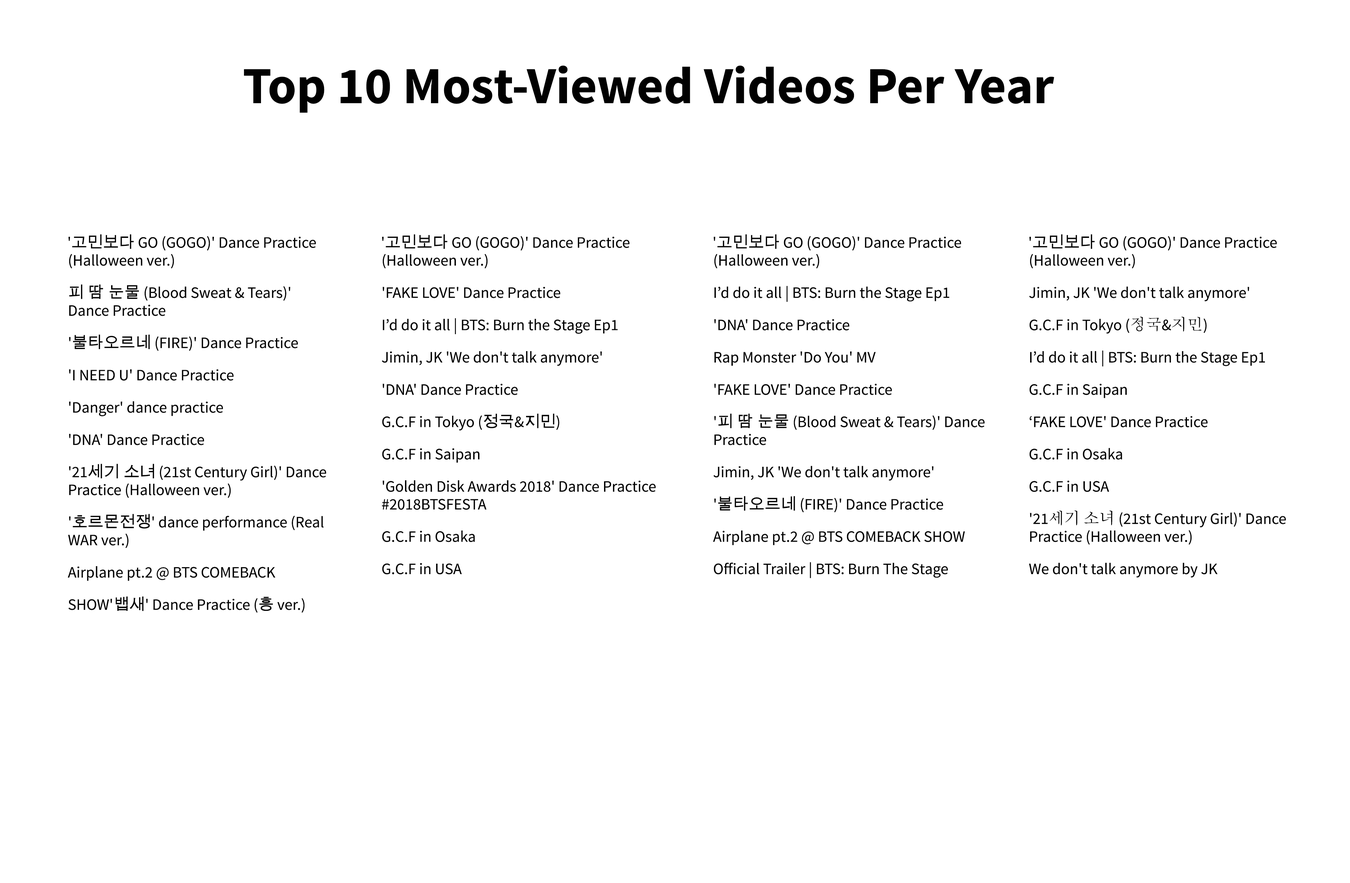
<style>
.page{position:relative;width:1350px;height:883px;background:#ffffff}
.page>*{position:absolute;margin:0}
.t1{font:51.9px "SourceSansPro-Bold";color:#010101}
.t2{font:15.9px/32.3px "SourceSansPro-Regular";color:#000000}
.t3{font:15.9px/32.3px "ArialUnicodeMS";color:#000000}
.t4{font:15.9px/17.9px "SourceSansPro-Regular";color:#000000}
.t5{font:15.9px/32.3px "AdobeMyungjoStd-Medium";color:#000000}
</style>
<div class="page">
<p class="t1" style="left:244px;top:65px;width:811px;height:48px">Top 10 Most-Viewed Videos Per Year</p>
<p class="t2" style="left:68px;top:234px;width:259px;height:379px">'<span class="t3">고민보다</span> GO (GOGO)' Dance Practice <span class="t4">(Halloween ver.)<br></span><span class="t3">피 땀 눈물</span> (Blood Sweat &amp; Tears)'  <span class="t4">Dance Practice<br></span>'<span class="t3">불타오르네</span> (FIRE)' Dance Practice<br>'I NEED U' Dance Practice<br>'Danger' dance practice <br>'DNA' Dance Practice<br>'21<span class="t3">세기 소녀</span> (21st Century Girl)' <span class="t4">Dance Practice (Halloween ver.)<br></span>'<span class="t3">호르몬전쟁</span>' dance performance <span class="t4">(Real WAR ver.)<br></span>Airplane pt.2 @ BTS COMEBACK SHOW'<span class="t3">뱁새</span>' Dance Practice (<span class="t3">흥</span> ver.)</p>
<p class="t2" style="left:382px;top:234px;width:274px;height:340px">'<span class="t3">고민보다</span> GO (GOGO)' Dance Practice <span class="t4">(Halloween ver.)<br></span>'FAKE LOVE' Dance Practice<br>I’d do it all | BTS: Burn the Stage Ep1 <br>Jimin, JK 'We don't talk anymore'<br>'DNA' Dance Practice<br>G.C.F in Tokyo (<span class="t3">정국</span>&amp;<span class="t3">지민</span>)<br>G.C.F in Saipan<br>'Golden Disk Awards 2018' Dance Practice <span class="t4">#2018BTSFESTA<br></span>G.C.F in Osaka<br>G.C.F in USA</p>
<p class="t2" style="left:713px;top:234px;width:272px;height:344px">'<span class="t3">고민보다</span> GO (GOGO)' Dance Practice <span class="t4">(Halloween ver.)<br></span>I’d do it all | BTS: Burn the Stage Ep1<br>'DNA' Dance Practice<br>Rap Monster 'Do You' MV<br>'FAKE LOVE' Dance Practice<br>'<span class="t3">피 땀 눈물</span> (Blood Sweat &amp; Tears)' Dance <span class="t4">Practice<br></span>Jimin, JK 'We don't talk anymore'<br>'<span class="t3">불타오르네</span> (FIRE)' Dance Practice <br>Airplane pt.2 @ BTS COMEBACK SHOW<br>Official Trailer | BTS: Burn The Stage</p>
<p class="t2" style="left:1029px;top:234px;width:257px;height:344px">'<span class="t3">고민보다</span> GO (GOGO)' Dance Practice <span class="t4">(Halloween ver.)<br></span>Jimin, JK 'We don't talk anymore'<br>G.C.F in Tokyo (<span class="t5">정국</span>&amp;<span class="t5">지민</span>)<br>I’d do it all | BTS: Burn the Stage Ep1<br>G.C.F in Saipan<br>‘FAKE LOVE' Dance Practice<br>G.C.F in Osaka<br>G.C.F in USA  <br>'21<span class="t5">세기 소녀</span> (21st Century Girl)' Dance <span class="t4">Practice (Halloween ver.) <br></span>We don't talk anymore by JK</p>
</div>
